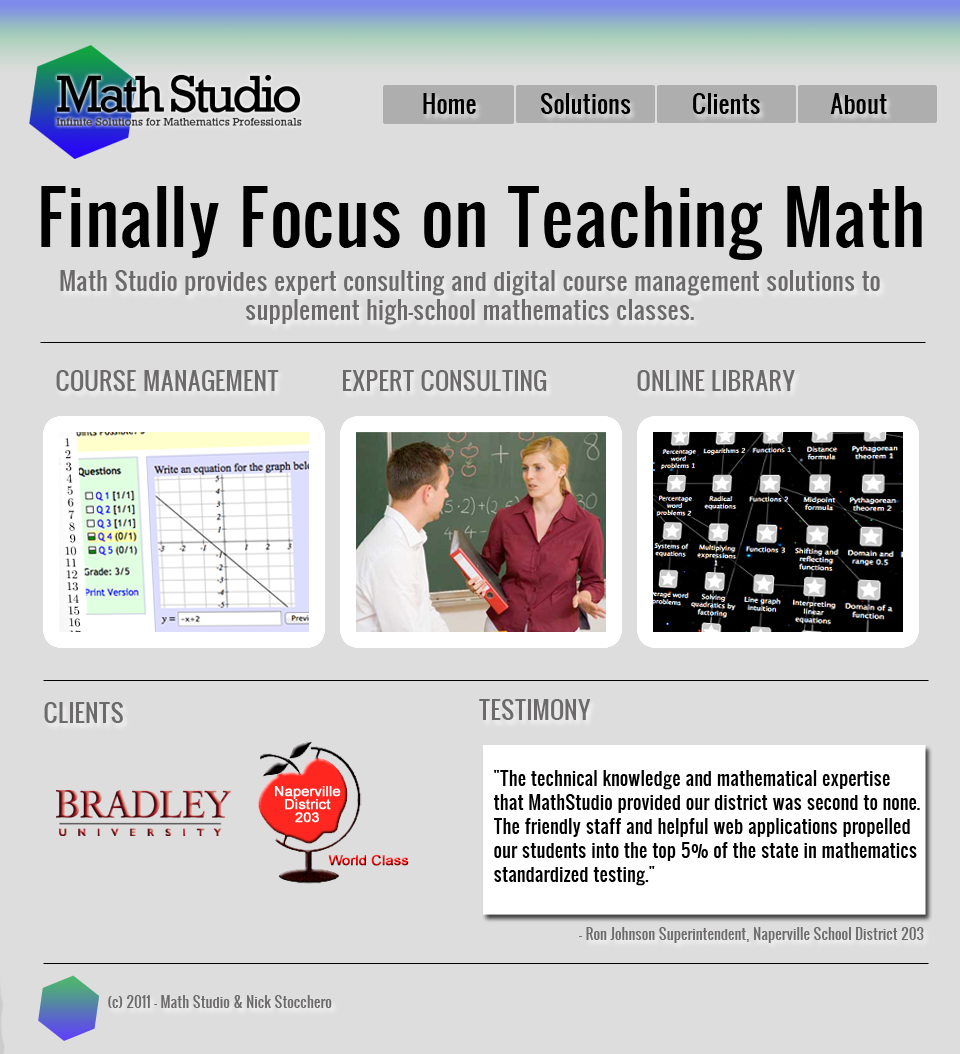
<style>
.page{position:relative;width:960px;height:1054px;background:#dddddd}
.page>*{position:absolute;margin:0}
.t1{font:24px "Oswald";color:#000000}
.t2{font:70px "Oswald";color:#000000}
.t3{font:24px "Oswald";color:#6c6a6a}
.t4{font:18px/24px "Oswald";color:#000000}
.t5{font:14px "Oswald";color:#6c6a6a}
</style>
<div class="page">
<p class="t1" style="left:423px;top:93px;width:53px;height:21px">Home</p>
<p class="t1" style="left:541px;top:93px;width:90px;height:21px">Solutions</p>
<p class="t1" style="left:693px;top:93px;width:67px;height:21px">Clients</p>
<p class="t1" style="left:830px;top:93px;width:57px;height:21px">About</p>
<p class="t2" style="left:41px;top:186px;width:881px;height:74px">Finally Focus on Teaching Math</p>
<p class="t3" style="left:60px;top:270px;width:820px;height:55px;text-align:center">Math Studio provides expert consulting and digital course management solutions to supplement high-school mathematics classes.</p>
<p class="t3" style="left:56px;top:370px;width:223px;height:21px">COURSE MANAGEMENT</p>
<p class="t3" style="left:343px;top:370px;width:204px;height:21px">EXPERT CONSULTING</p>
<p class="t3" style="left:637px;top:370px;width:158px;height:21px">ONLINE LIBRARY</p>
<p class="t3" style="left:44px;top:702px;width:79px;height:21px">CLIENTS</p>
<p class="t3" style="left:479px;top:699px;width:112px;height:21px">TESTIMONY</p>
<p class="t4" style="left:494px;top:770px;width:426px;height:116px">"The technical knowledge and mathematical expertise that MathStudio provided our district was second to none. The friendly staff and helpful web applications propelled our students into the top 5% of the state in mathematics standardized testing."</p>
<p class="t5" style="left:579px;top:927px;width:345px;height:16px">- Ron Johnson Superintendent, Naperville School District 203</p>
<p class="t5" style="left:108px;top:995px;width:224px;height:13px">(c) 2011 - Math Studio &amp; Nick Stocchero</p>
</div>
